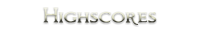
<style>
.page{position:relative;width:200px;height:35px;background:#ffffff}
.page>*{position:absolute;margin:0}
.t1{font:18px "Bronzetti-SmallCapitals"}
</style>
<div class="page">
<p class="t1" style="left:43px;top:7px;width:114px;height:18px">Highscores</p>
</div>
